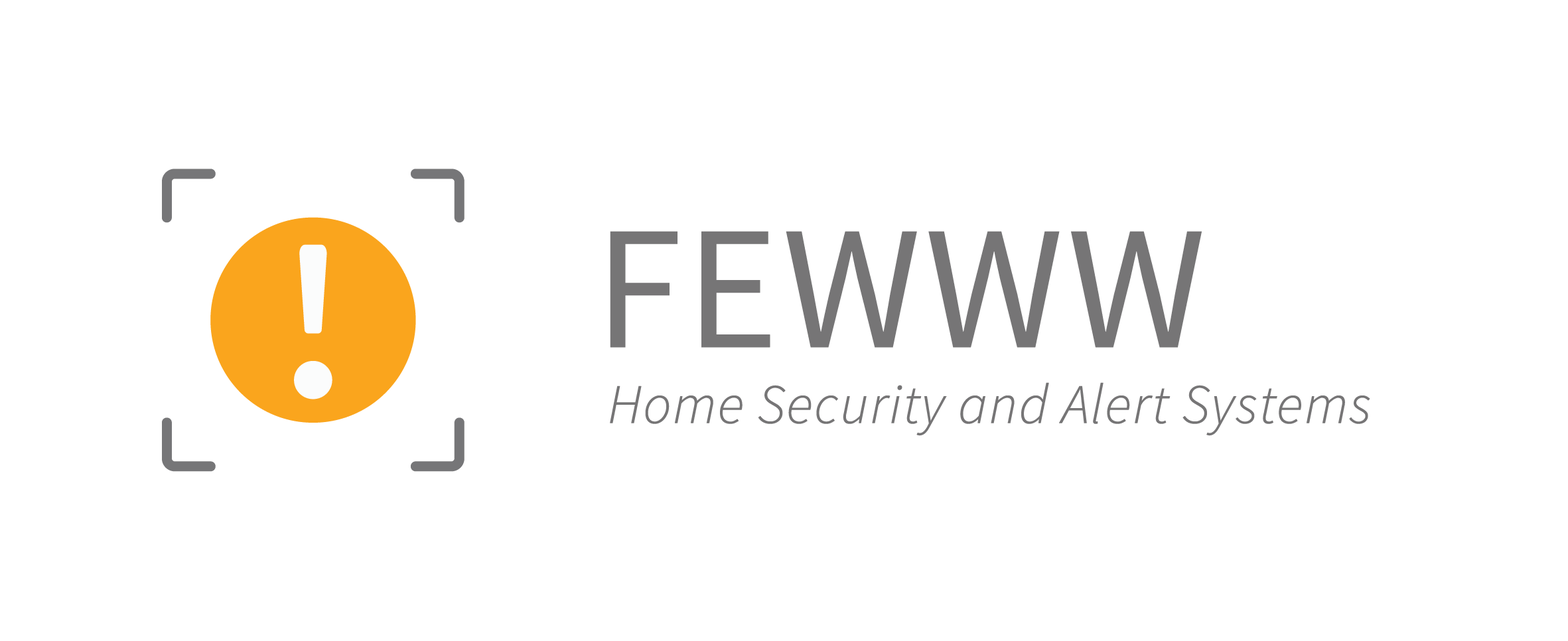
<style>
.page{position:relative;width:1568px;height:641px;background:#ffffff}
.page>*{position:absolute;margin:0}
.t1{font:176.3px "SourceSansPro-Regular";color:#767576;font-weight:bold}
.t2{font:55.7px "SourceSansPro-LightItalic";color:#767576;font-weight:bold}
</style>
<div class="page">
<p class="t1" style="left:610px;top:231px;width:592px;height:117px">FEWWW</p>
<p class="t2" style="left:610px;top:382px;width:760px;height:54px">Home Security and Alert Systems</p>
</div>
